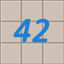
<style>
.page{position:relative;width:64px;height:64px;background:#cdc0b4}
.page>*{position:absolute;margin:0}
.t1{font:34.7px "Calibri-Italic";color:#1f7fd1;font-weight:bold}
</style>
<div class="page">
<p class="t1" style="left:13px;top:18px;width:37px;height:25px">42</p>
</div>
